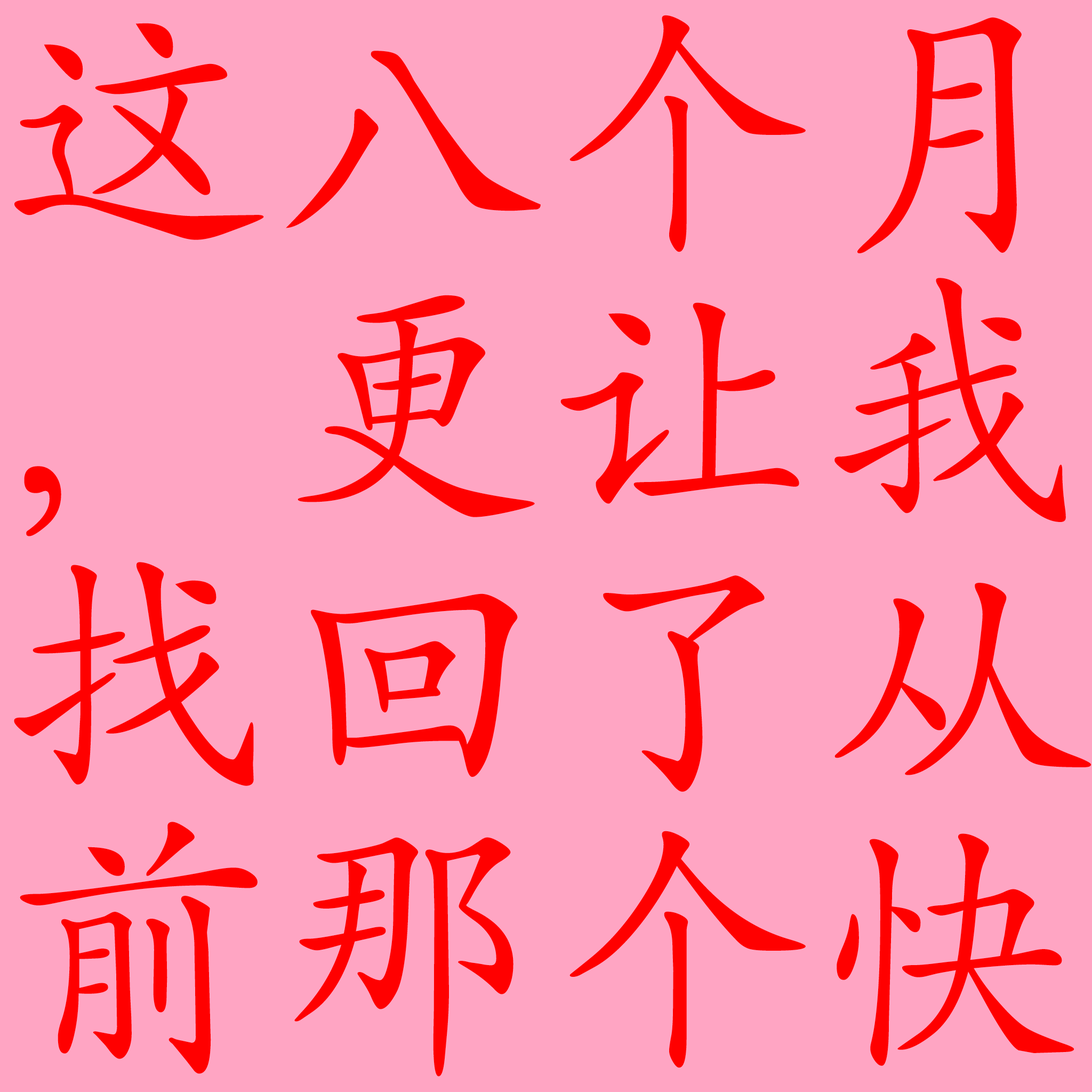
<style>
.page{position:relative;width:1092px;height:1092px;background:#ffa5c3}
.page>*{position:absolute;margin:0}
.t1{font:266.6px/271.9px "SIL-Kai-Reg-Jian";letter-spacing:0.025em;color:#ff0000}
</style>
<div class="page">
<p class="t1" style="left:14px;top:15px;width:1077px;height:1062px">这八个月<br>，更让我<br>找回了从<br>前那个快</p>
</div>
